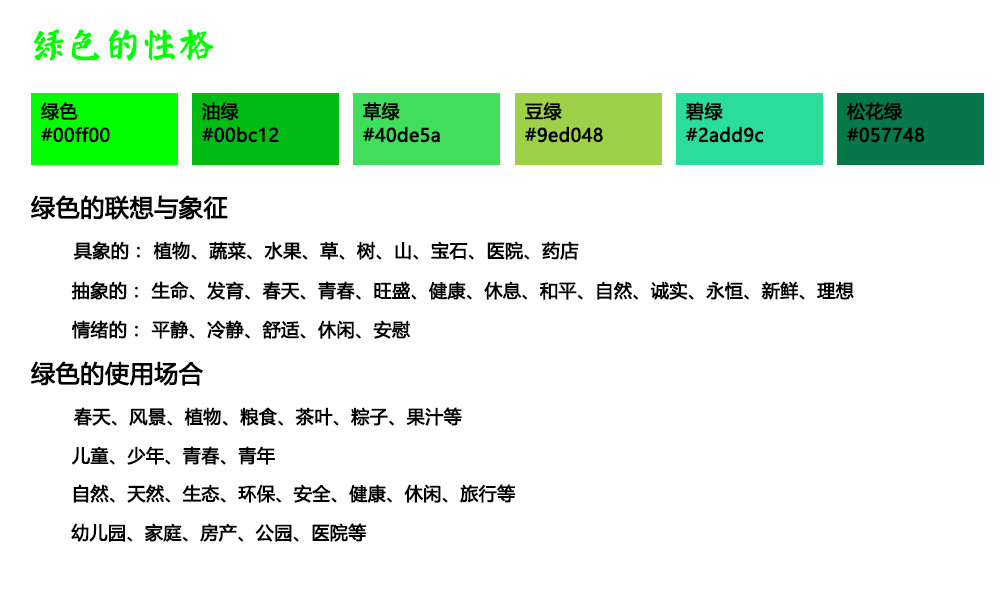
<style>
.page{position:relative;width:1000px;height:600px;background:#ffffff}
.page>*{position:absolute;margin:0}
.t1{font:36px "øów·»îów©I";color:#00ff00;font-weight:bold}
.t2{font:18px/24px "MicrosoftYaHei";color:#030000;font-weight:bold}
.t3{font:18px/24px "MicrosoftYaHei";color:#060000;font-weight:bold}
.t4{font:18px/24px "MicrosoftYaHei";color:#010000;font-weight:bold}
.t5{font:18px/24px "MicrosoftYaHei";color:#000000;font-weight:bold}
.t6{font:24px "MicrosoftYaHei";color:#000000;font-weight:bold}
.t7{font:18px "MicrosoftYaHei";color:#000000;font-weight:bold}
</style>
<div class="page">
<p class="t1" style="left:33px;top:29px;width:181px;height:32px">绿色的性格</p>
<p class="t2" style="left:41px;top:102px;width:69px;height:41px">绿色<br>#00ff00</p>
<p class="t3" style="left:202px;top:102px;width:77px;height:41px">油绿<br>#00bc12</p>
<p class="t4" style="left:363px;top:102px;width:77px;height:41px">草绿<br>#40de5a</p>
<p class="t4" style="left:525px;top:102px;width:78px;height:41px">豆绿<br>#9ed048</p>
<p class="t5" style="left:686px;top:102px;width:77px;height:41px">碧绿<br>#2add9c</p>
<p class="t4" style="left:846px;top:102px;width:79px;height:41px">松花绿<br>#057748</p>
<p class="t6" style="left:31px;top:195px;width:197px;height:25px">绿色的联想与象征</p>
<p class="t7" style="left:74px;top:241px;width:505px;height:19px">具象的： 植物、蔬菜、水果、草、树、山、宝石、医院、药店</p>
<p class="t7" style="left:71px;top:281px;width:783px;height:19px">抽象的： 生命、发育、春天、青春、旺盛、健康、休息、和平、自然、诚实、永恒、新鲜、理想</p>
<p class="t7" style="left:72px;top:320px;width:338px;height:19px">情绪的： 平静、冷静、舒适、休闲、安慰</p>
<p class="t6" style="left:31px;top:361px;width:172px;height:25px">绿色的使用场合</p>
<p class="t7" style="left:74px;top:407px;width:388px;height:19px">春天、风景、植物、粮食、茶叶、粽子、果汁等</p>
<p class="t7" style="left:72px;top:446px;width:203px;height:19px">儿童、少年、青春、青年</p>
<p class="t7" style="left:73px;top:484px;width:443px;height:19px">自然、天然、生态、环保、安全、健康、休闲、旅行等</p>
<p class="t7" style="left:71px;top:523px;width:296px;height:19px">幼儿园、家庭、房产、公园、医院等</p>
</div>
